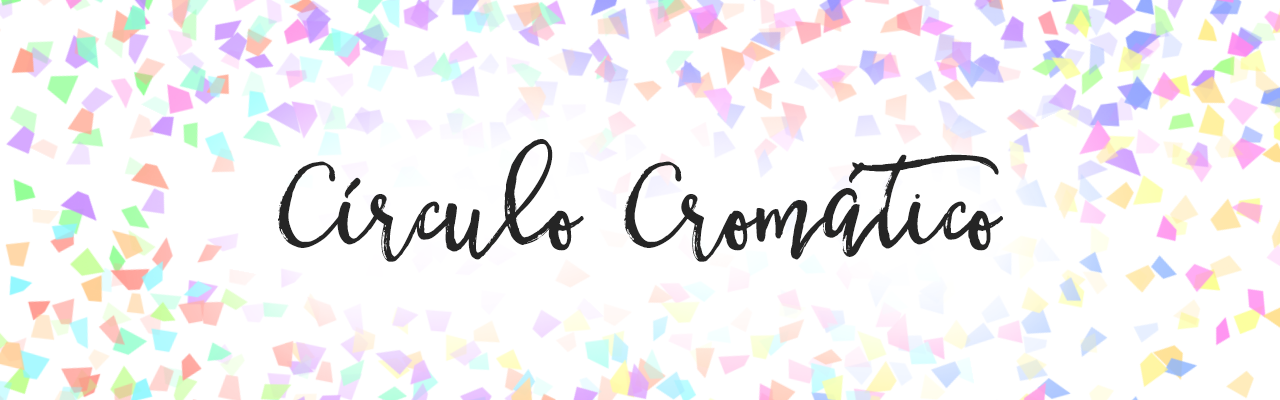
<style>
.page{position:relative;width:1280px;height:400px;background:#ffffff}
.page>*{position:absolute;margin:0}
.t1{font:111.4px "BetterFly-Draft";color:#252525}
</style>
<div class="page">
<p class="t1" style="left:278px;top:139px;width:725px;height:123px">Círculo Cromático</p>
</div>
